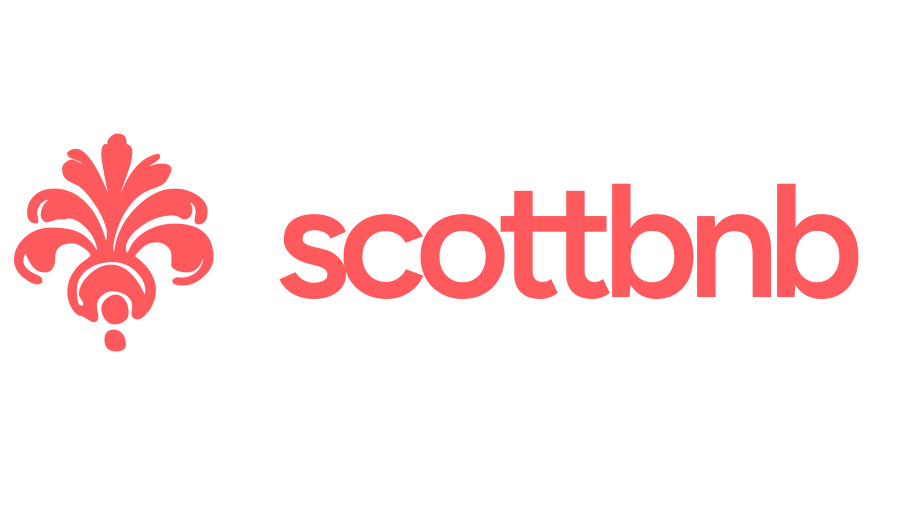
<style>
.page{position:relative;width:900px;height:520px;background:#ffffff}
.page>*{position:absolute;margin:0}
.t1{font:222.6px "BodoniOrnamentsITCTT";letter-spacing:-0.075em;color:#fe595d;font-weight:bold;scale:1.11 1}
.t2{font:161.8px "Figtree_604.000wght_0ital";letter-spacing:-0.075em;color:#fe595d;font-weight:bold}
</style>
<div class="page">
<p class="t1" style="left:13px;top:133px;width:201px;height:219px">s</p>
<p class="t2" style="left:279px;top:183px;width:580px;height:116px">scottbnb</p>
</div>
